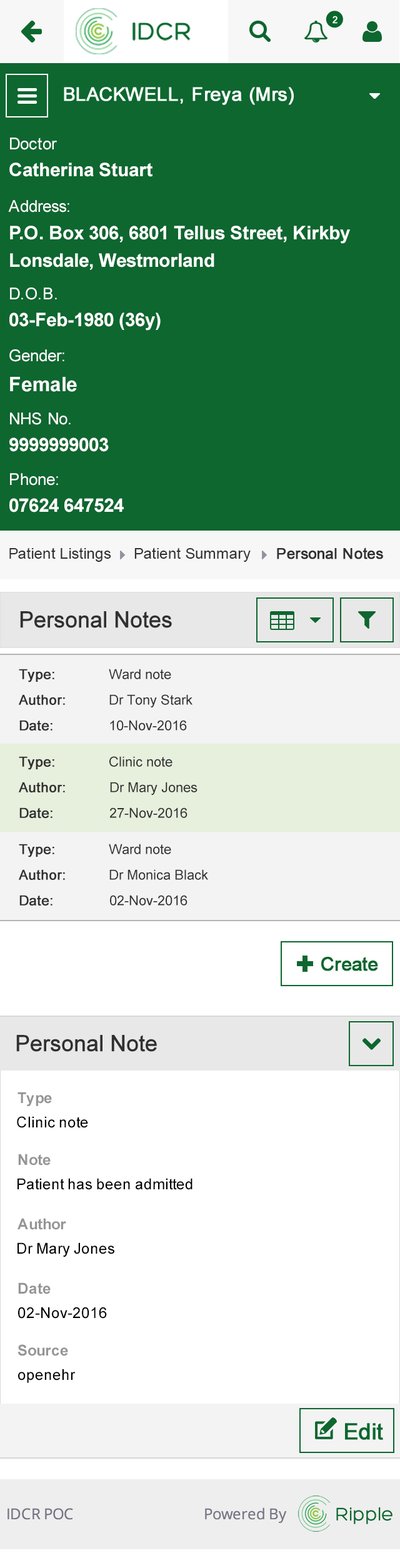
<style>
.page{position:relative;width:400px;height:1568px;background:#ffffff}
.page>*{position:absolute;margin:0}
.t1{font:18.7px/27.2px "Arial-BoldMT";color:#ffffff}
.t2{font:16.3px/27.2px "ArialMT";color:#ffffff}
.t3{font:16.2px/27.2px "ArialMT";color:#ffffff}
.t4{font:20px/29.7px "Arial-BoldMT";color:#ffffff}
.t5{font:15px "ArialMT";color:#313131}
.t6{font:15px "ArialMT";color:#313131;font-weight:bold}
.t7{font:22.5px "ArialMT";color:#303030;font-weight:bold}
.t8{font:13.7px "ArialMT";color:#303030;font-weight:bold}
.t9{font:13.7px "ArialMT";color:#303030}
.t10{font:15px "Arial-BoldMT";color:#959595}
.t11{font:15px "ArialMT";color:#000000}
</style>
<div class="page">
<p class="t1" style="left:9px;top:137px;width:143px;height:40px"><span class="t2">Doctor<br></span>Catherina Stuart</p>
<p class="t1" style="left:8px;top:200px;width:342px;height:70px"><span class="t3">Address: <br></span>P.O. Box 306, 6801 Tellus Street, Kirkby Lonsdale, Westmorland</p>
<p class="t1" style="left:9px;top:287px;width:152px;height:44px"><span class="t2">D.O.B. <br></span>03-Feb-1980 (36y)</p>
<p class="t2" style="left:9px;top:349px;width:68px;height:43px">Gender: <br><span class="t4">Female</span></p>
<p class="t1" style="left:9px;top:412px;width:100px;height:40px"><span class="t2">NHS No. <br></span>9999999003</p>
<p class="t1" style="left:9px;top:473px;width:115px;height:39px"><span class="t3">Phone: <br></span>07624 647524</p>
<p class="t5" style="left:9px;top:547px;width:102px;height:15px">Patient Listings</p>
<p class="t5" style="left:134px;top:547px;width:117px;height:15px">Patient Summary</p>
<p class="t6" style="left:277px;top:547px;width:106px;height:12px">Personal Notes</p>
<p class="t7" style="left:20px;top:611px;width:152px;height:17px">Personal Notes</p>
<p class="t8" style="left:19px;top:669px;width:35px;height:13px">Type:</p>
<p class="t9" style="left:109px;top:669px;width:62px;height:10px">Ward note</p>
<p class="t8" style="left:19px;top:694px;width:46px;height:11px">Author:</p>
<p class="t9" style="left:109px;top:694px;width:83px;height:13px">Dr Tony Stark</p>
<p class="t8" style="left:19px;top:720px;width:33px;height:11px">Date:</p>
<p class="t9" style="left:110px;top:720px;width:77px;height:11px">10-Nov-2016</p>
<p class="t8" style="left:19px;top:756px;width:35px;height:14px">Type:</p>
<p class="t9" style="left:109px;top:756px;width:63px;height:11px">Clinic note</p>
<p class="t8" style="left:19px;top:782px;width:46px;height:10px">Author:</p>
<p class="t9" style="left:110px;top:782px;width:87px;height:13px">Dr Mary Jones</p>
<p class="t8" style="left:19px;top:807px;width:33px;height:11px">Date:</p>
<p class="t9" style="left:109px;top:807px;width:78px;height:11px">27-Nov-2016</p>
<p class="t8" style="left:19px;top:844px;width:35px;height:13px">Type:</p>
<p class="t9" style="left:109px;top:844px;width:62px;height:10px">Ward note</p>
<p class="t8" style="left:19px;top:869px;width:46px;height:11px">Author:</p>
<p class="t9" style="left:109px;top:869px;width:99px;height:11px">Dr Monica Black</p>
<p class="t8" style="left:19px;top:895px;width:33px;height:11px">Date:</p>
<p class="t9" style="left:110px;top:895px;width:77px;height:11px">02-Nov-2016</p>
<p class="t7" style="left:16px;top:1035px;width:141px;height:17px">Personal Note</p>
<p class="t10" style="left:17px;top:1092px;width:35px;height:14px">Type</p>
<p class="t11" style="left:17px;top:1116px;width:71px;height:12px">Clinic note</p>
<p class="t10" style="left:18px;top:1154px;width:33px;height:12px">Note</p>
<p class="t11" style="left:17px;top:1178px;width:175px;height:12px">Patient has been admitted</p>
<p class="t10" style="left:17px;top:1218px;width:49px;height:12px">Author</p>
<p class="t11" style="left:17px;top:1242px;width:97px;height:15px">Dr Mary Jones</p>
<p class="t10" style="left:18px;top:1282px;width:33px;height:12px">Date</p>
<p class="t11" style="left:18px;top:1307px;width:89px;height:12px">02-Nov-2016</p>
<p class="t10" style="left:17px;top:1344px;width:51px;height:12px">Source</p>
<p class="t11" style="left:18px;top:1369px;width:58px;height:14px">openehr</p>
</div>
